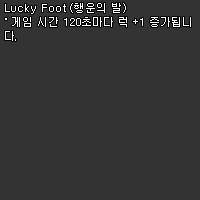
<style>
.page{position:relative;width:200px;height:200px;background:#333333}
.page>*{position:absolute;margin:0}
.t1{font:11px/14px "Dotum";color:#ffffff}
</style>
<div class="page">
<p class="t1" style="left:5px;top:3px;width:186px;height:38px">Lucky Foot (행운의 발)<br>˚ 게임 시간 120초마다 럭 +1 증가됩니<br>다.</p>
</div>
